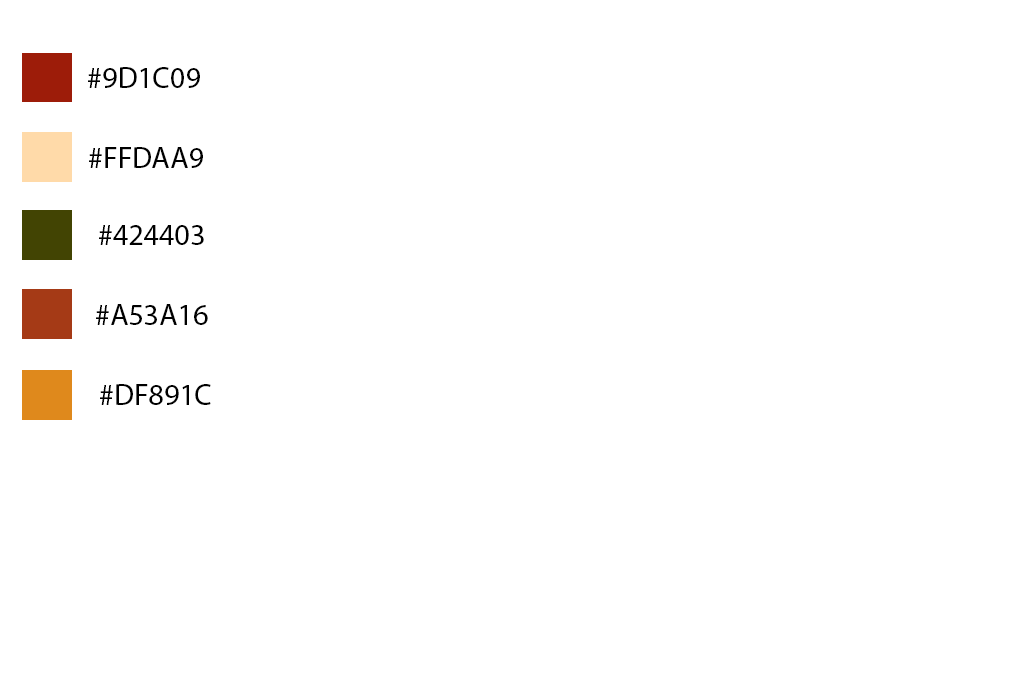
<style>
.page{position:relative;width:1023px;height:682px;background:#ffffff}
.page>*{position:absolute;margin:0}
.t1{font:30px "MyriadPro-Regular";color:#000000}
</style>
<div class="page">
<p class="t1" style="left:88px;top:67px;width:112px;height:21px">#9D1C09</p>
<p class="t1" style="left:89px;top:147px;width:114px;height:21px">#FFDAA9</p>
<p class="t1" style="left:99px;top:225px;width:105px;height:20px">#424403</p>
<p class="t1" style="left:96px;top:304px;width:112px;height:21px">#A53A16</p>
<p class="t1" style="left:100px;top:384px;width:111px;height:21px">#DF891C</p>
</div>
